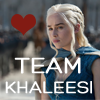
<style>
.page{position:relative;width:100px;height:100px}
.page>*{position:absolute;margin:0}
.t1{font:18px/20px "Hero";color:#ffffff;font-weight:bold}
.t2{font:24px/20px "Hero";color:#ffffff;font-weight:bold}
</style>
<div class="page">
<p class="t1" style="left:5px;top:57px;width:87px;height:37px;text-align:center"><span class="t2">TEAM<br></span>KHALEESI</p>
</div>
